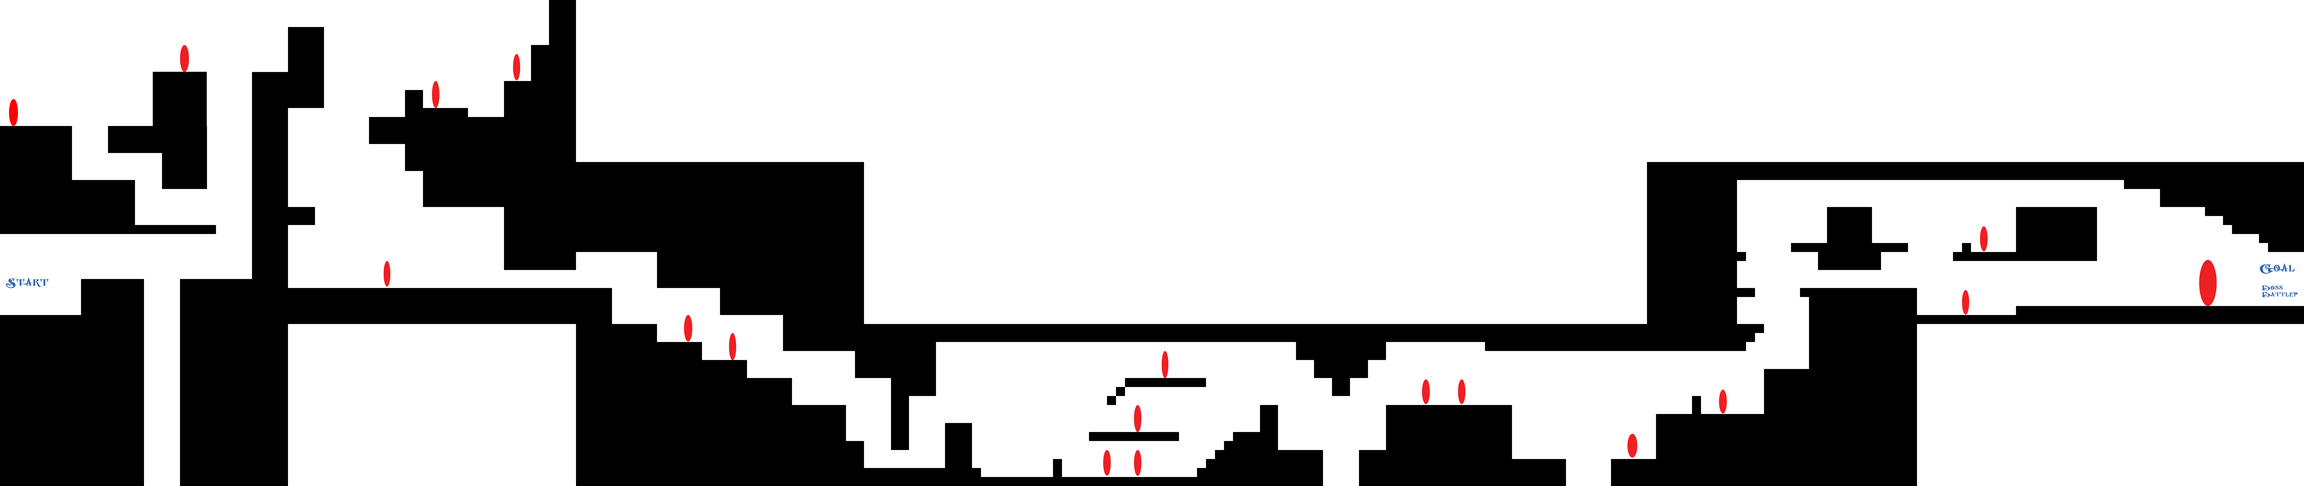
<style>
.page{position:relative;width:2304px;height:486px;background:#ffffff}
.page>*{position:absolute;margin:0}
.t1{font:9.1px "Ornatique";letter-spacing:0.04em;color:#2e67b2;font-weight:bold;scale:1.55 1}
.t2{font:9px "Ornatique";letter-spacing:0.04em;color:#2e67b2;font-weight:bold;scale:1.56 1}
.t3{font:5.4px "Ornatique";letter-spacing:0.04em;color:#2e67b2;font-weight:bold;scale:1.56 1}
</style>
<div class="page">
<p class="t1" style="left:2259px;top:263px;width:36px;height:11px">Goal</p>
<p class="t2" style="left:6px;top:278px;width:42px;height:10px">Start</p>
<p class="t3" style="left:2262px;top:285px;width:36px;height:12px">Boss<br>Battle?</p>
</div>
